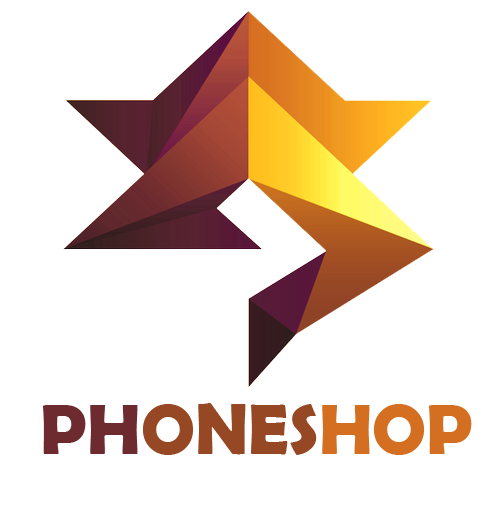
<style>
.page{position:relative;width:500px;height:526px;background:#ffffff}
.page>*{position:absolute;margin:0}
.t1{font:72px "BerlinSansFBDemi-Bold";color:#964724}
.t2{font:72px "BerlinSansFBDemi-Bold";color:#6d2a2f}
.t3{font:72px "BerlinSansFBDemi-Bold";color:#d46f21}
</style>
<div class="page">
<p class="t1" style="left:43px;top:403px;width:429px;height:52px"><span class="t2">PH</span>ONES<span class="t3">HOP</span></p>
</div>
